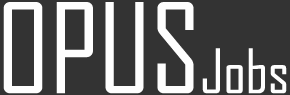
<style>
.page{position:relative;width:290px;height:95px;background:#333333}
.page>*{position:absolute;margin:0}
.t1{font:119.1px "AgencyFB-Reg";color:#fefefe}
.t2{font:58.8px "AgencyFB-Reg";color:#fefefe}
</style>
<div class="page">
<p class="t1" style="left:3px;top:2px;width:284px;height:92px">OPUS<span class="t2">Jobs</span></p>
</div>
